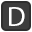
<style>
.page{position:relative;width:32px;height:32px;background:#3d3d3d}
.page>*{position:absolute;margin:0}
.t1{font:27.5px "MyriadPro-Regular";color:#ffffff}
</style>
<div class="page">
<p class="t1" style="left:9px;top:7px;width:16px;height:19px">D</p>
</div>
